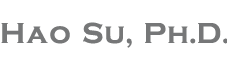
<style>
.page{position:relative;width:227px;height:68px;background:#ffffff}
.page>*{position:absolute;margin:0}
.t1{font:30px "CopperplateGothic-Bold";letter-spacing:0.1em;color:#767778}
</style>
<div class="page">
<p class="t1" style="left:1px;top:22px;width:228px;height:26px">Hao Su, Ph.D.</p>
</div>
